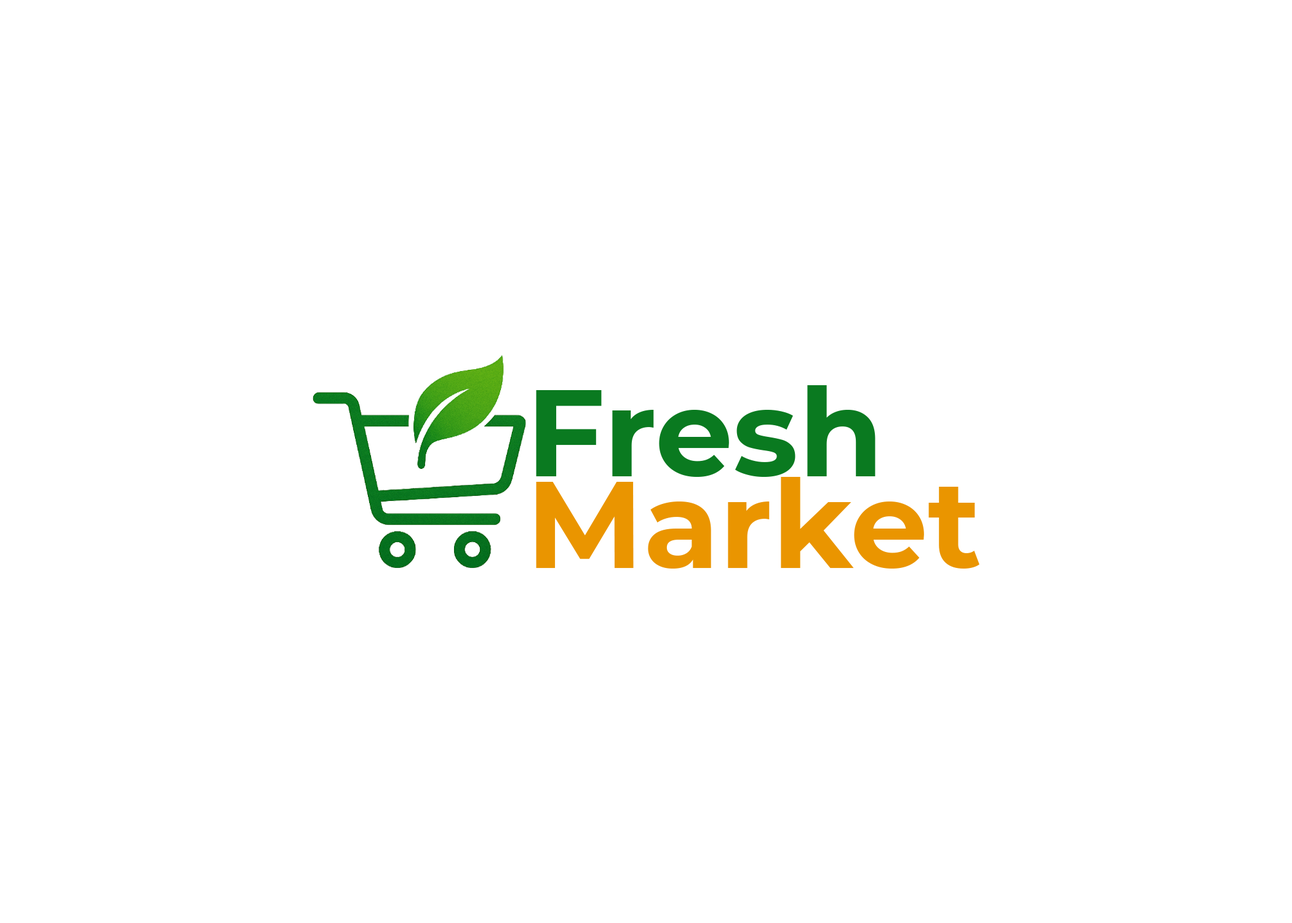
<style>
.page{position:relative;width:1292px;height:923px;background:#ffffff}
.page>*{position:absolute;margin:0}
.t1{font:123.1px "Montserrat-Bold";color:#0a7a20}
.t2{font:123.1px "Montserrat-Bold";color:#ea9500}
</style>
<div class="page">
<p class="t1" style="left:536px;top:385px;width:340px;height:92px">Fresh</p>
<p class="t2" style="left:536px;top:477px;width:444px;height:92px">Market</p>
</div>
